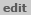
<style>
.page{position:relative;width:31px;height:15px;background:#cccccc}
.page>*{position:absolute;margin:0}
.t1{font:11px "Verdana-Bold";color:#5a5a5a}
</style>
<div class="page">
<p class="t1" style="left:3px;top:3px;width:24px;height:9px">edit</p>
</div>
